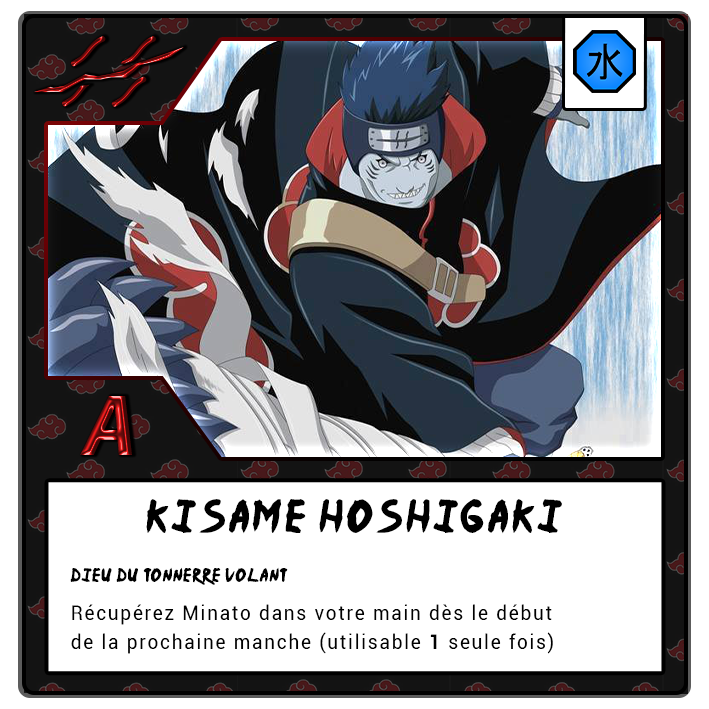
<style>
.page{position:relative;width:709px;height:709px;background:#ffffff}
.page>*{position:absolute;margin:0}
.t1{font:87.5px "MyriadPro-BoldIt";letter-spacing:-0.12em}
.t2{font:37.5px "Ninja-Naruto";letter-spacing:0.1em;color:#000000}
.t3{font:15.4px "Ninja-Naruto";letter-spacing:0.07em;color:#000000}
.t4{font:20.8px/29.2px "Roboto-Regular";letter-spacing:0.1em;color:#000000;scale:0.9 1}
.t5{font:20.8px/29.2px "Roboto-Bold";letter-spacing:0.1em;color:#000000;scale:0.9 1}
</style>
<div class="page">
<p class="t1" style="left:80px;top:396px;width:52px;height:59px">A</p>
<p class="t2" style="left:146px;top:499px;width:416px;height:35px">Kisame Hoshigaki</p>
<p class="t3" style="left:70px;top:567px;width:218px;height:18px">DIEU DU TONNERRE VOLANT</p>
<p class="t4" style="left:71px;top:604px;width:482px;height:50px">Récupérez Minato dans votre main dès le début <br>de la prochaine manche (utilisable <span class="t5">1</span> seule fois)</p>
</div>
